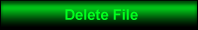
<style>
.page{position:relative;width:198px;height:30px}
.page>*{position:absolute;margin:0}
.t1{font:14.7px "Arial-BoldMT";color:#00ff1e}
</style>
<div class="page">
<p class="t1" style="left:65px;top:9px;width:73px;height:11px">Delete File</p>
</div>
